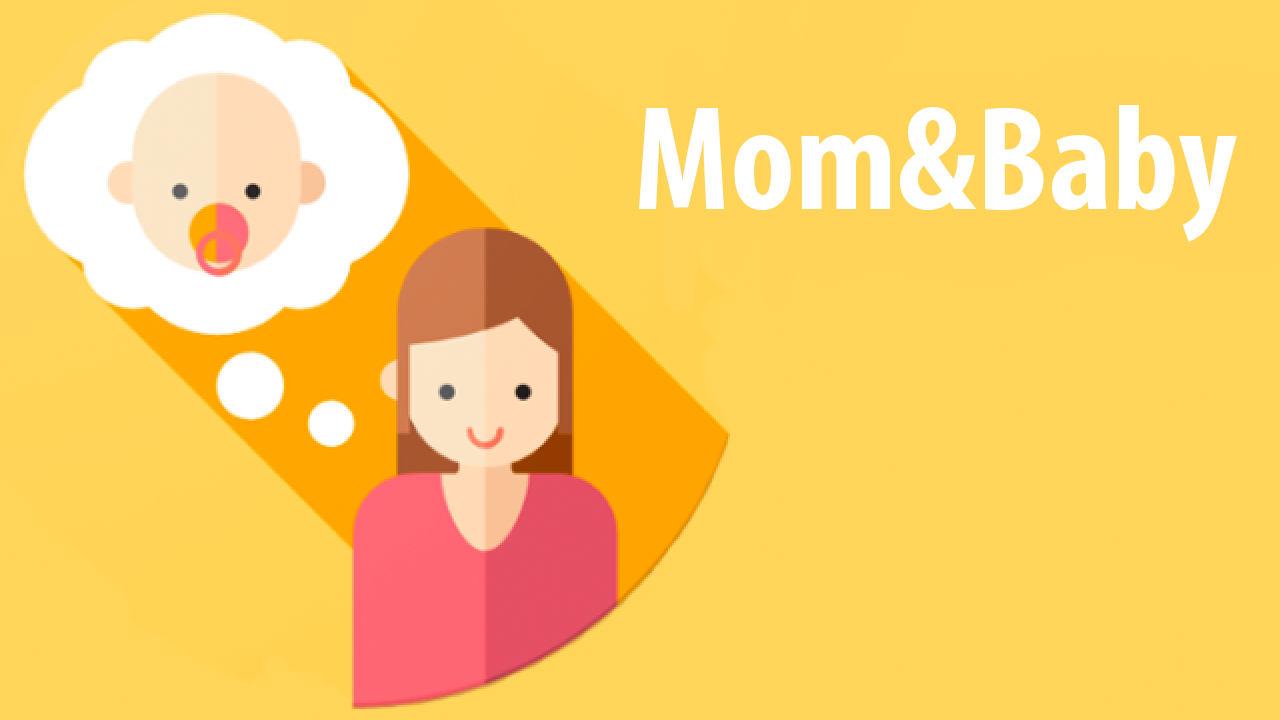
<style>
.page{position:relative;width:1280px;height:720px;background:#ffd55a}
.page>*{position:absolute;margin:0}
.t1{font:150px "MyriadPro-BoldCond";color:#ffffff}
</style>
<div class="page">
<p class="t1" style="left:639px;top:105px;width:598px;height:137px">Mom&amp;Baby</p>
</div>
